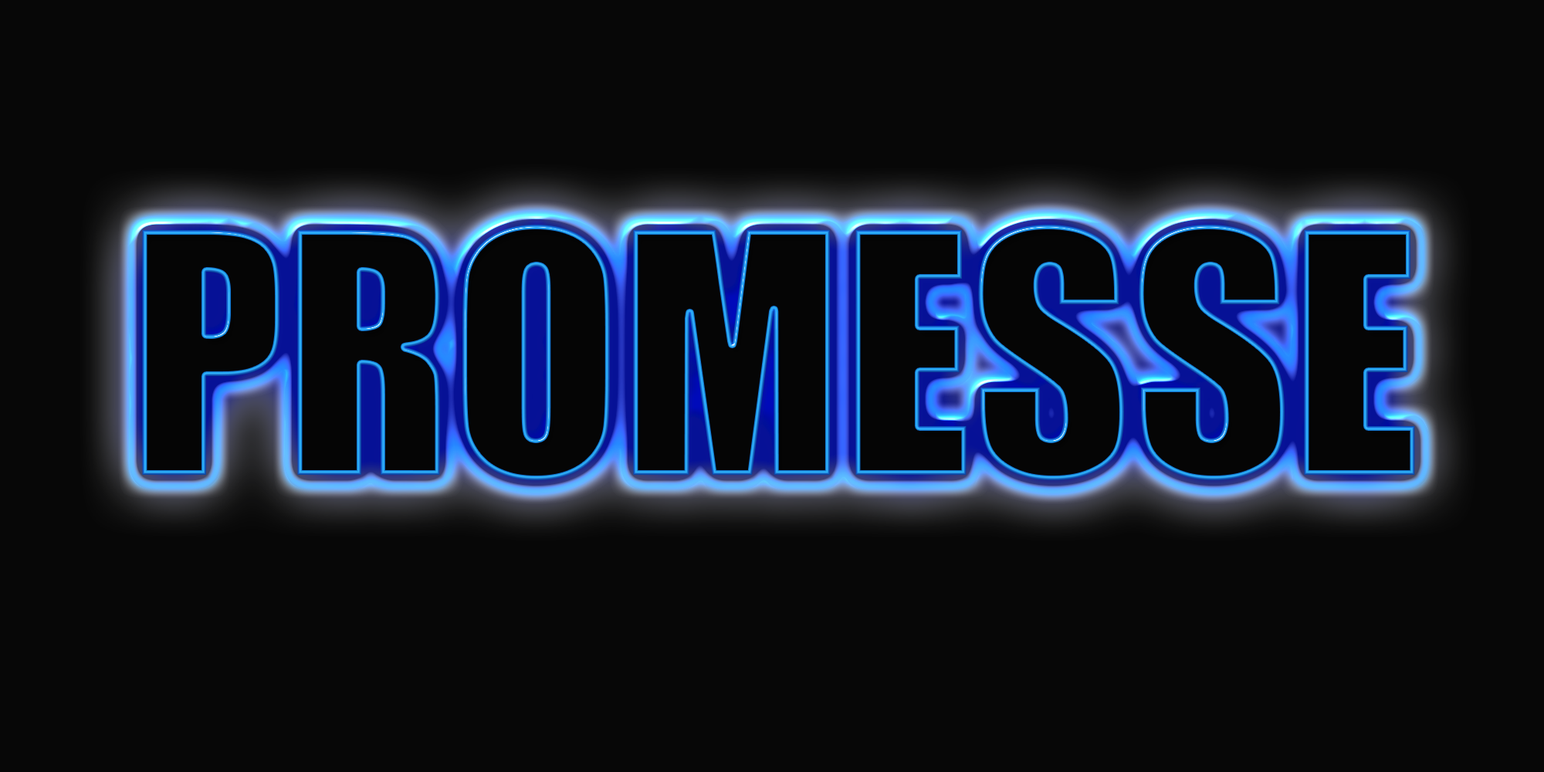
<style>
.page{position:relative;width:1544px;height:772px;background:#070707}
.page>*{position:absolute;margin:0}
.t1{font:309.6px "Impact";color:#080808}
.t2{font:309.6px "Impact";color:#050505}
</style>
<div class="page">
<p class="t1" style="left:142px;top:225px;width:1273px;height:255px">PROMESSE</p>
<p class="t2" style="left:142px;top:225px;width:1273px;height:255px">PROMESSE</p>
</div>
